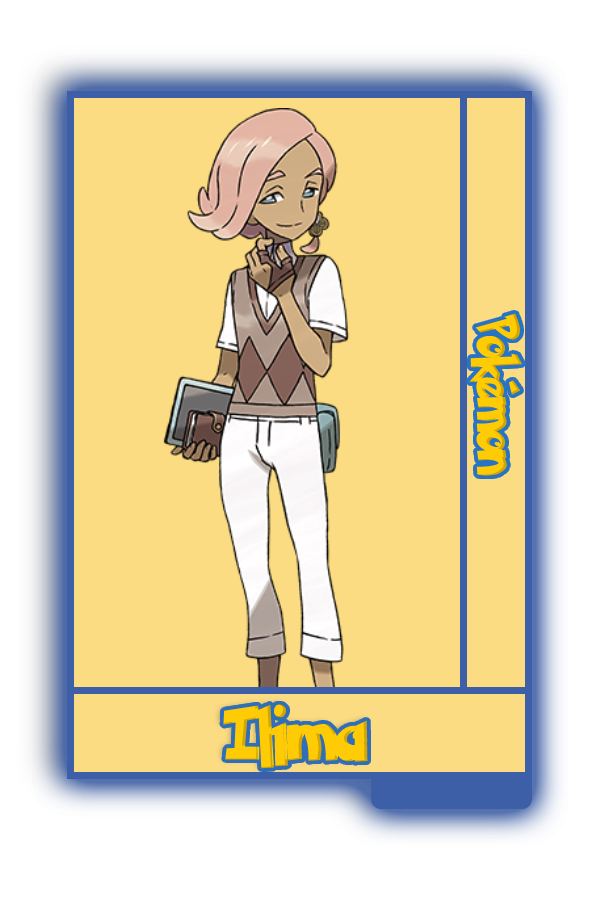
<style>
.page{position:relative;width:600px;height:900px;background:#fbdc83}
.page>*{position:absolute;margin:0}
.t1{font:48.8px "PokemonSolidNormal";color:#ffcb05;scale:0.8 1}
.t2{font:60.1px "PokemonSolidNormal";color:#ffcb05;scale:0.96 1}
</style>
<div class="page">
<p class="t1" style="left:469px;top:313px;width:54px;height:163px;rotate:90deg">Pokémon</p>
<p class="t2" style="left:223px;top:704px;width:145px;height:65px">Ilima</p>
</div>
